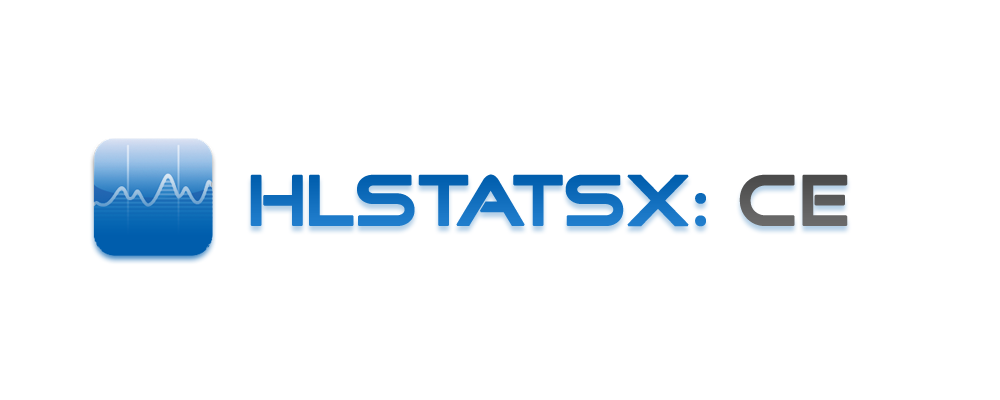
<style>
.page{position:relative;width:1000px;height:400px;background:#ffffff}
.page>*{position:absolute;margin:0}
.t1{font:72px "GoodTimes";color:#005dac;font-weight:bold}
.t2{font:72px "GoodTimes";color:#6c6c6c;font-weight:bold}
</style>
<div class="page">
<p class="t1" style="left:250px;top:174px;width:598px;height:53px">HLstatsX: <span class="t2">CE</span></p>
</div>
